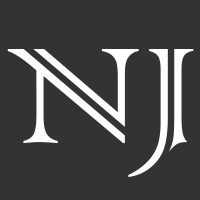
<style>
.page{position:relative;width:200px;height:200px;background:#333333}
.page>*{position:absolute;margin:0}
.t1{font:179.7px "ColonnaMT";color:#ffffff}
</style>
<div class="page">
<p class="t1" style="left:7px;top:49px;width:187px;height:128px">NJ</p>
</div>
